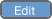
<style>
.page{position:relative;width:52px;height:19px;background:#6699cc}
.page>*{position:absolute;margin:0}
.t1{font:12px "HelveticaNeue";color:#ffffff}
</style>
<div class="page">
<p class="t1" style="left:15px;top:6px;width:20px;height:9px">Edit</p>
</div>
